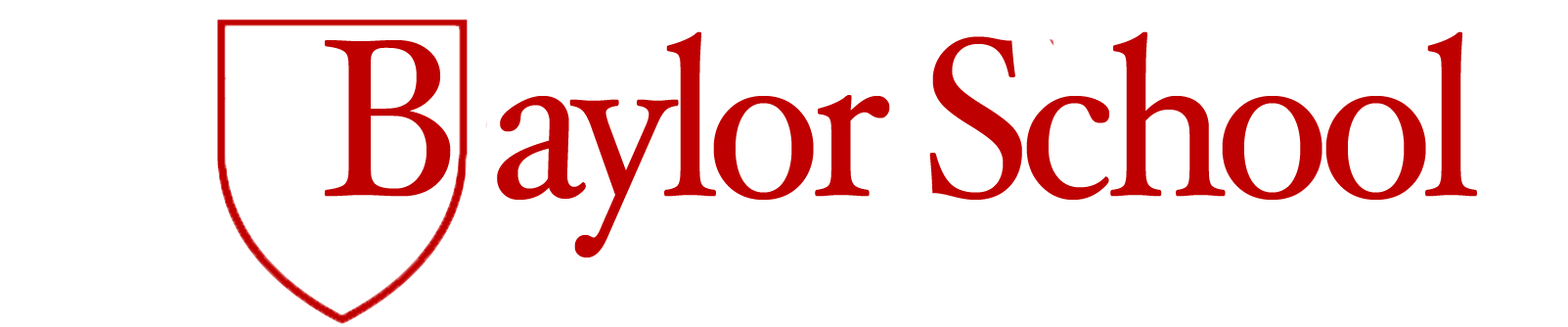
<style>
.page{position:relative;width:1568px;height:327px;background:#ffffff}
.page>*{position:absolute;margin:0}
.t1{font:224.2px "HoeflerText-Regular";letter-spacing:-0.05em;color:#bf0000;scale:0.95 1}
</style>
<div class="page">
<p class="t1" style="left:325px;top:31px;width:1152px;height:226px">B aylor School</p>
</div>
